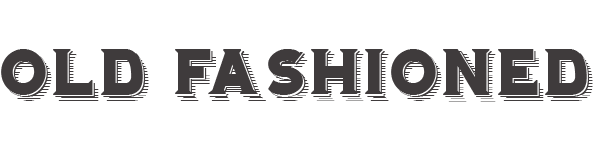
<style>
.page{position:relative;width:594px;height:150px;background:#ffffff}
.page>*{position:absolute;margin:0}
.t1{font:58px "Hominis";color:#3f3b3c}
</style>
<div class="page">
<p class="t1" style="left:1px;top:49px;width:592px;height:53px">Old Fashioned</p>
</div>
